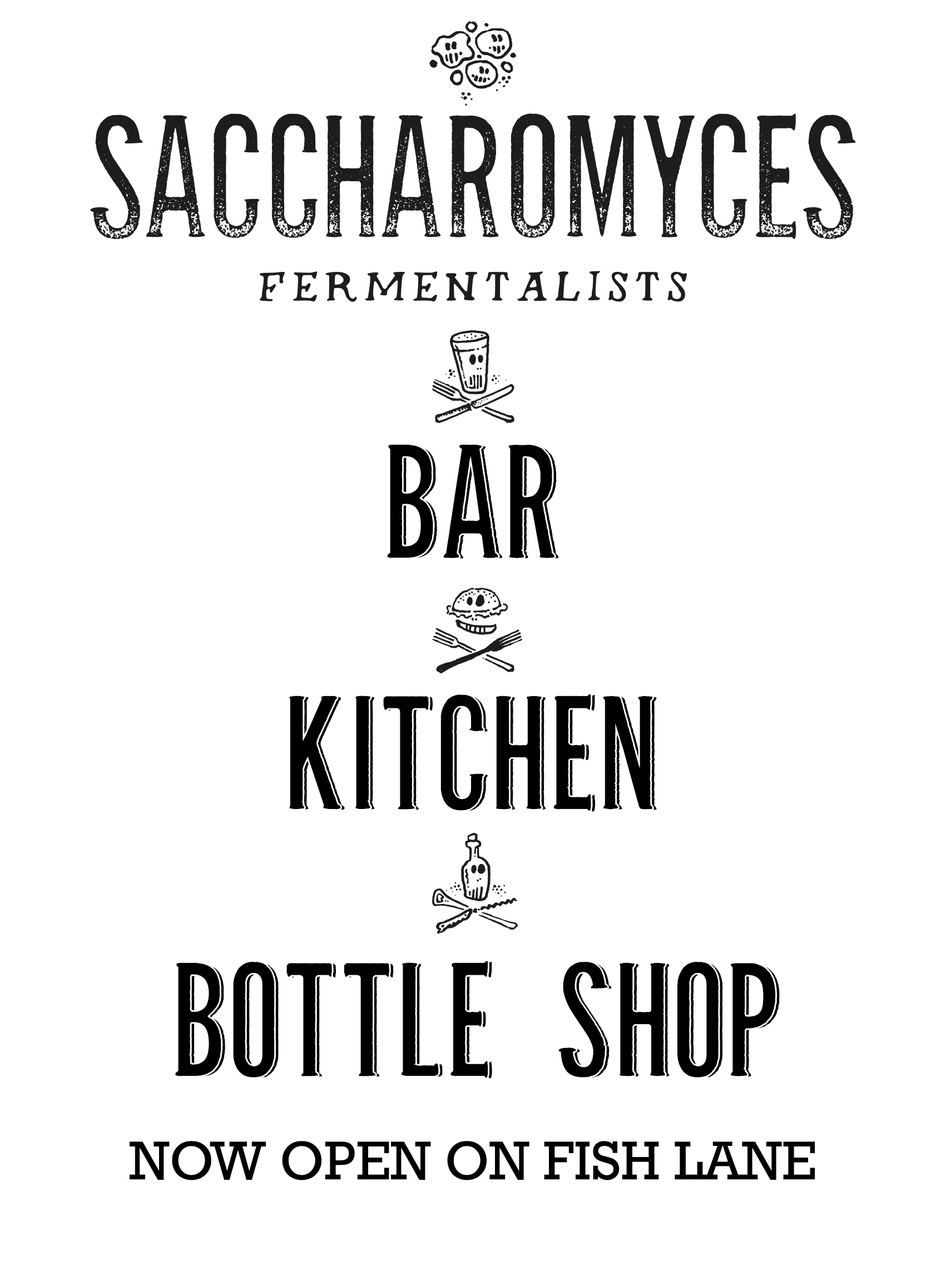
<style>
.page{position:relative;width:946px;height:1261px;background:#ffffff}
.page>*{position:absolute;margin:0}
.t1{font:166.8px "ParlourPro-Regular";color:#000000}
.t2{font:55.6px "Rockwell";color:#000000;text-transform:uppercase}
</style>
<div class="page">
<p class="t1" style="left:387px;top:444px;width:172px;height:115px">bar</p>
<p class="t1" style="left:289px;top:694px;width:368px;height:118px">kitchen</p>
<p class="t1" style="left:175px;top:961px;width:604px;height:118px">bottle shop</p>
<p class="t2" style="left:130px;top:1141px;width:685px;height:39px">now open on fish lane</p>
</div>
